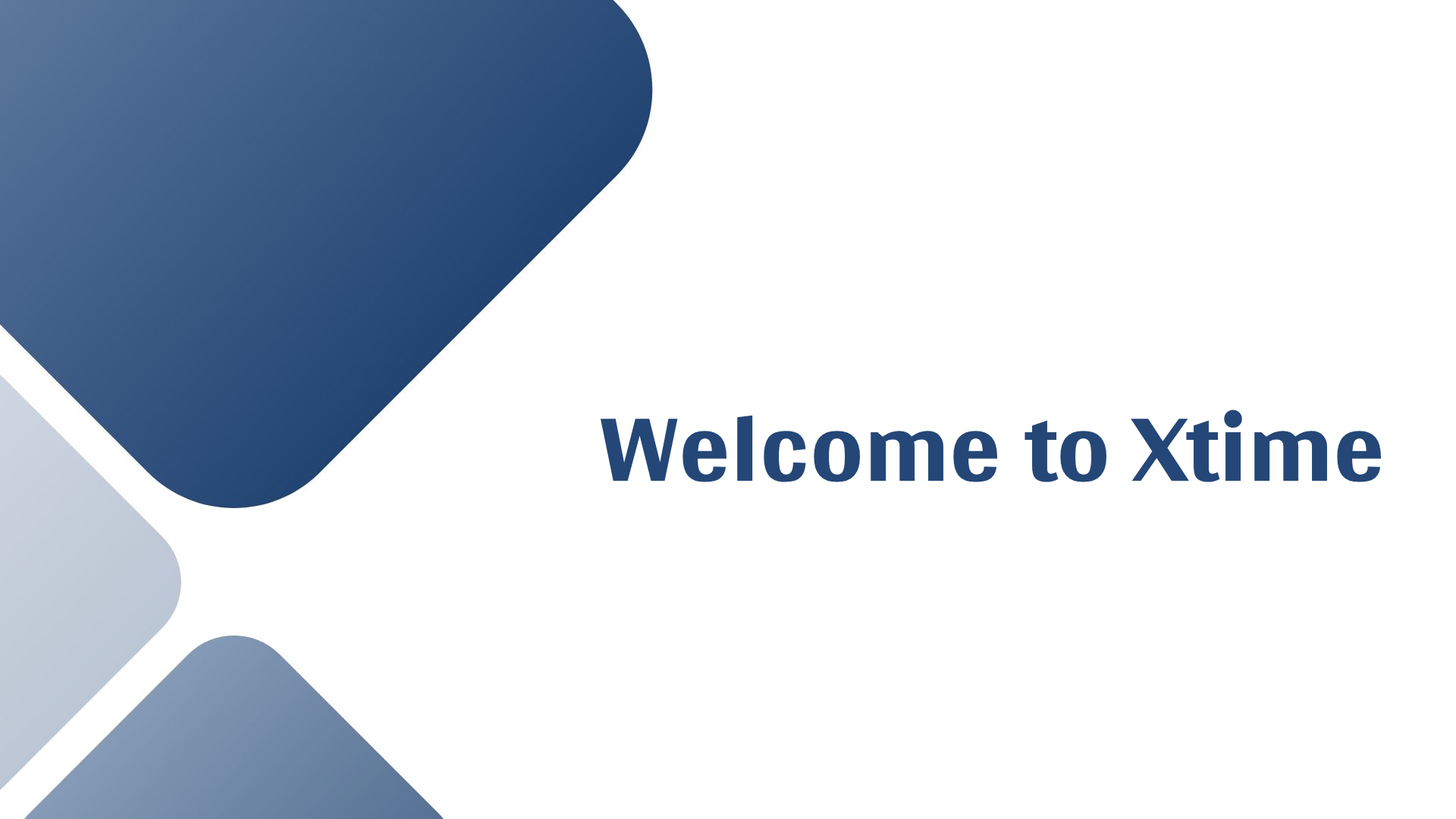
<style>
.page{position:relative;width:1456px;height:819px;background:#ffffff}
.page>*{position:absolute;margin:0}
.t1{font:151.7px "Gidugu";color:#254777}
</style>
<div class="page">
<p class="t1" style="left:600px;top:409px;width:781px;height:73px">Welcome to Xtime</p>
</div>
